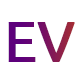
<style>
.page{position:relative;width:82px;height:82px;background:#ffffff}
.page>*{position:absolute;margin:0}
.t1{font:56px "Ubuntu-Regular";font-weight:bold}
</style>
<div class="page">
<p class="t1" style="left:8px;top:22px;width:67px;height:40px">EV</p>
</div>
